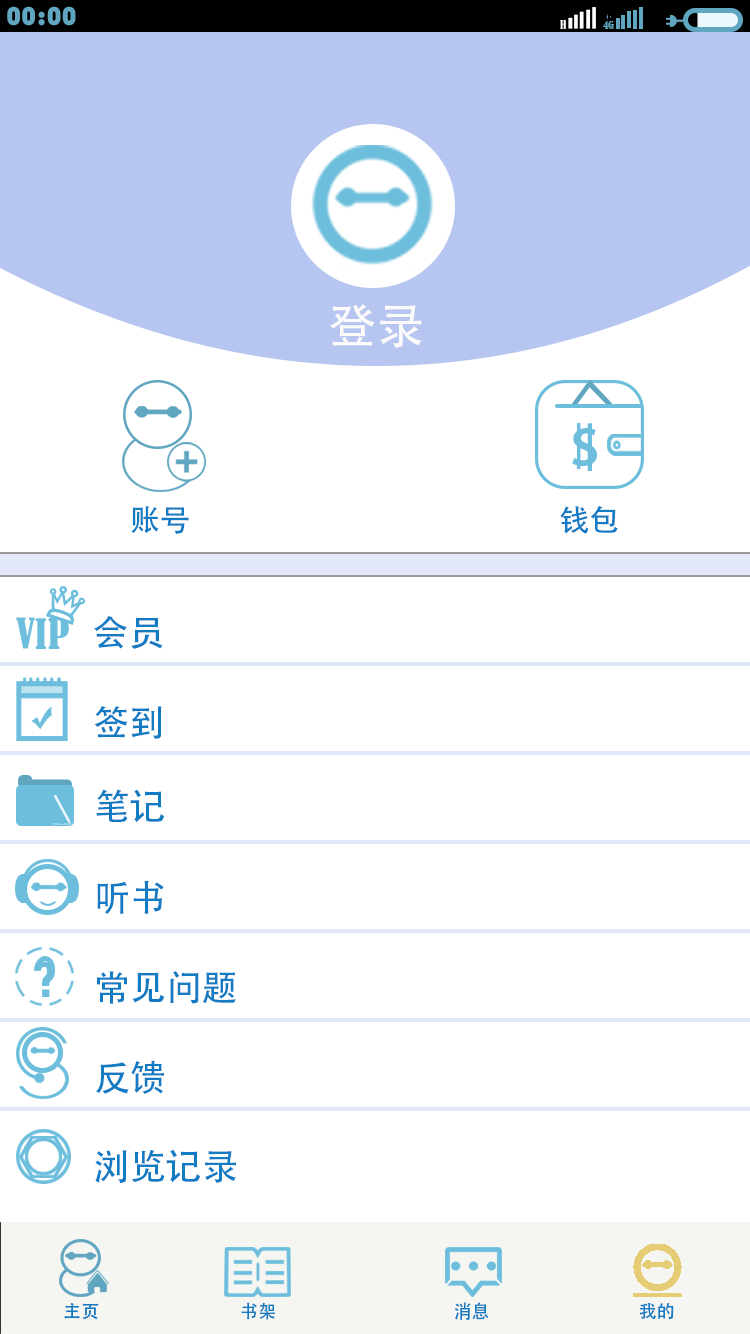
<style>
.page{position:relative;width:750px;height:1334px;background:#ffffff}
.page>*{position:absolute;margin:0}
.t1{font:48px "AdobeHeitiStd-Regular";color:#fcfafa}
.t2{font:40.6px "AdobeHeitiStd-Regular";color:#6cbedc;scale:1.04 1}
.t3{font:42px "AdobeHeitiStd-Regular";color:#6cbedc;scale:1.15 1}
.t4{font:65.9px "AdobeHeitiStd-Regular";color:#6cbedc;scale:1.04 1}
.t5{font:30px "AdobeHeitiStd-Regular";color:#137bc4}
.t6{font:38.8px "BernardMT-Condensed";color:#6cbedc}
.t7{font:36px "AdobeHeitiStd-Regular";color:#137bc4}
.t8{font:39.1px "BernardMT-Condensed";color:#6cbedc}
.t9{font:39.3px "BernardMT-Condensed";color:#6cbedc}
.t10{font:18px "AdobeHeitiStd-Regular";color:#137bc4}
</style>
<div class="page">
<p class="t1" style="left:330px;top:304px;width:92px;height:44px">登录</p>
<p class="t2" style="left:577px;top:423px;width:4px;height:46px">|</p>
<p class="t3" style="left:587px;top:423px;width:5px;height:48px">|</p>
<p class="t4" style="left:572px;top:428px;width:25px;height:38px">s</p>
<p class="t5" style="left:131px;top:505px;width:487px;height:29px">账号                                                       钱包</p>
<p class="t6" style="left:16px;top:617px;width:19px;height:32px">V</p>
<p class="t7" style="left:94px;top:615px;width:69px;height:34px">会员</p>
<p class="t8" style="left:35px;top:618px;width:11px;height:31px">I</p>
<p class="t9" style="left:48px;top:618px;width:21px;height:31px">P</p>
<p class="t7" style="left:94px;top:706px;width:68px;height:33px">签到</p>
<p class="t7" style="left:96px;top:789px;width:69px;height:34px">笔记</p>
<p class="t7" style="left:97px;top:880px;width:67px;height:34px">听书</p>
<p class="t7" style="left:97px;top:971px;width:139px;height:33px">常见问题</p>
<p class="t7" style="left:96px;top:1060px;width:68px;height:34px">反馈</p>
<p class="t7" style="left:95px;top:1149px;width:141px;height:34px">浏览记录</p>
<p class="t10" style="left:64px;top:1302px;width:610px;height:18px">主页                                   书架                                            消息                                     我的</p>
</div>
